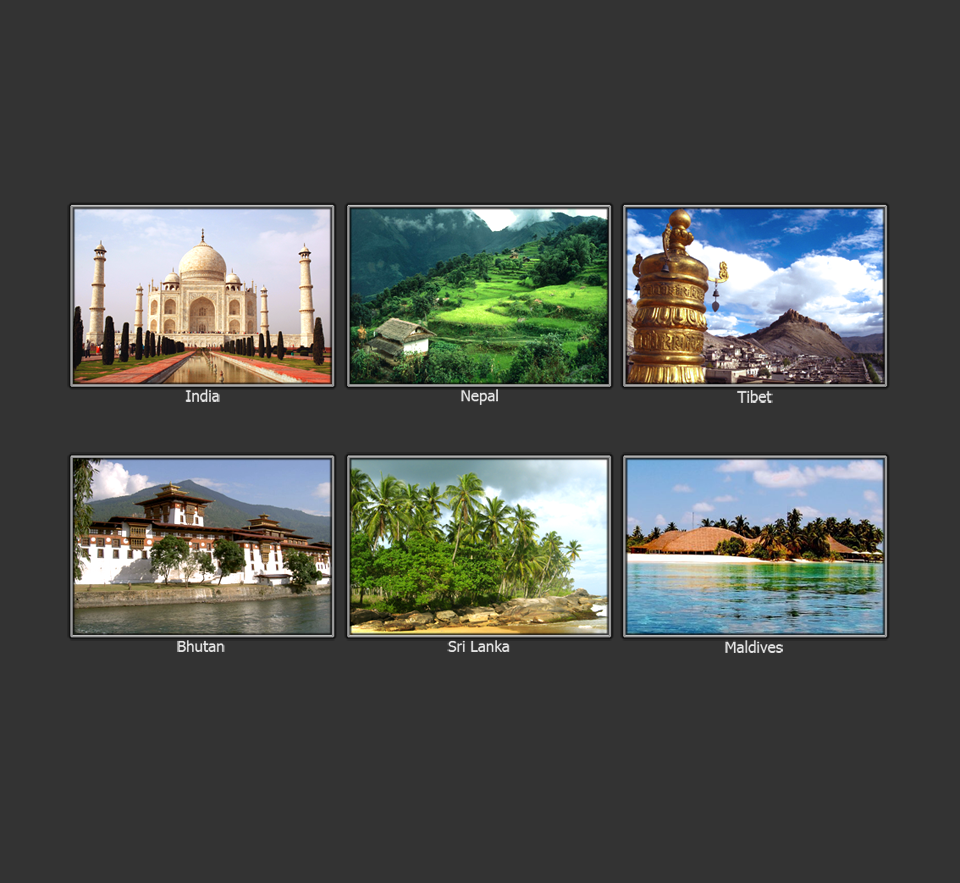
<style>
.page{position:relative;width:960px;height:883px;background:#333333}
.page>*{position:absolute;margin:0}
.t1{font:15.2px "Tahoma";color:#e6e6e6}
</style>
<div class="page">
<p class="t1" style="left:185px;top:389px;width:35px;height:13px">India</p>
<p class="t1" style="left:461px;top:389px;width:37px;height:16px">Nepal</p>
<p class="t1" style="left:737px;top:390px;width:36px;height:13px">Tibet</p>
<p class="t1" style="left:177px;top:640px;width:48px;height:12px">Bhutan</p>
<p class="t1" style="left:447px;top:640px;width:63px;height:12px">Sri Lanka</p>
<p class="t1" style="left:725px;top:640px;width:58px;height:13px">Maldives</p>
</div>
